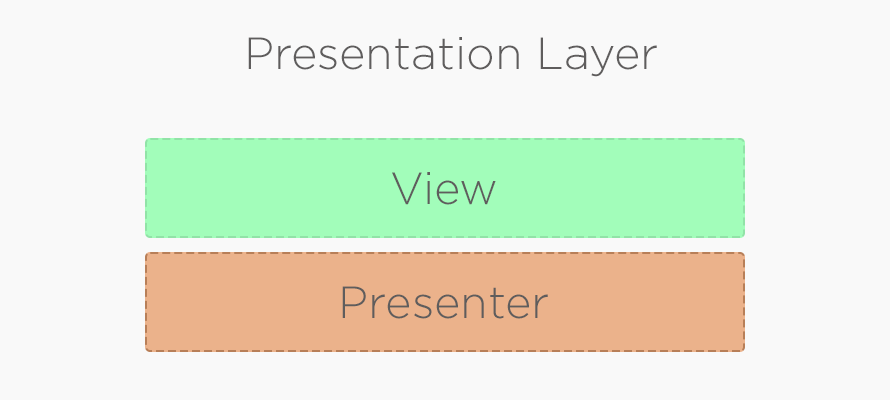
<style>
.page{position:relative;width:890px;height:400px;background:#f9f9f9}
.page>*{position:absolute;margin:0}
.t1{font:45px "GothamPro-Light";color:#5f5d5d}
</style>
<div class="page">
<p class="t1" style="left:248px;top:37px;width:409px;height:40px">Presentation Layer</p>
<p class="t1" style="left:392px;top:172px;width:104px;height:33px">View</p>
<p class="t1" style="left:342px;top:286px;width:206px;height:33px">Presenter</p>
</div>
